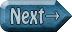
<style>
.page{position:relative;width:72px;height:32px}
.page>*{position:absolute;margin:0}
.t1{font:19.2px "HoboStd";color:#b2c9d5;scale:0.83 1}
.t2{font:24px "ArialMT";color:#b2c9d5;scale:0.6 1}
</style>
<div class="page">
<p class="t1" style="left:10px;top:8px;width:50px;height:16px">Next<span class="t2">→</span></p>
</div>
